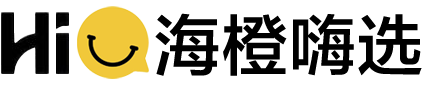
<style>
.page{position:relative;width:425px;height:90px;background:#ffffff}
.page>*{position:absolute;margin:0}
.t1{font:66px "FZLTZHK--GBK1-0";letter-spacing:0.025em;color:#000000}
</style>
<div class="page">
<p class="t1" style="left:155px;top:13px;width:267px;height:63px">海橙嗨选</p>
</div>
